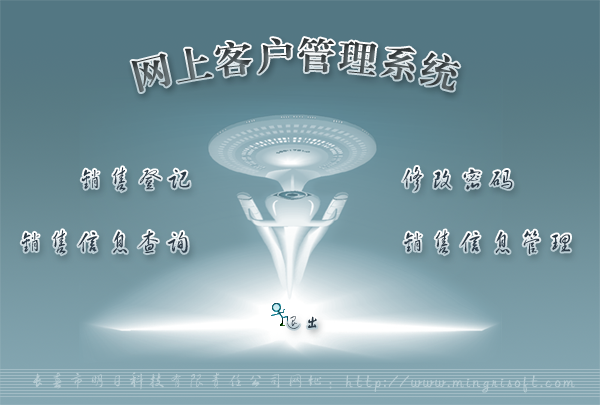
<style>
.page{position:relative;width:600px;height:405px}
.page>*{position:absolute;margin:0}
.t1{font:36px "FZXBSJW--GB1-0";letter-spacing:0.1em}
.t2{font:27px "FZHCJW--GB1-0";letter-spacing:0.1em;color:#2a3844}
.t3{font:18px "FZHCJW--GB1-0";letter-spacing:0.1em;color:#283642}
.t4{font:18px "FZHCJW--GB1-0";letter-spacing:0.1em;color:#b6cbd2}
</style>
<div class="page">
<p class="t1" style="left:131px;top:38px;width:329px;height:54px">网上客户管理系统</p>
<p class="t2" style="left:81px;top:167px;width:109px;height:25px">销售登记</p>
<p class="t2" style="left:402px;top:167px;width:111px;height:25px">修改密码</p>
<p class="t2" style="left:21px;top:230px;width:167px;height:25px">销售信息查询</p>
<p class="t2" style="left:404px;top:230px;width:167px;height:25px">销售信息管理</p>
<p class="t3" style="left:287px;top:316px;width:30px;height:13px">退出</p>
<p class="t4" style="left:33px;top:372px;width:542px;height:21px">长春市明日科技有限责任公司网址：http://www.mingrisoft.com</p>
</div>
